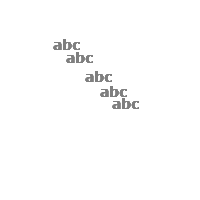
<style>
.page{position:relative;width:200px;height:200px;background:#ffffff}
.page>*{position:absolute;margin:0}
.t1{font:14px "Verdana-Bold";color:#7f7f7f}
</style>
<div class="page">
<p class="t1" style="left:53px;top:39px;width:27px;height:11px">abc</p>
<p class="t1" style="left:53px;top:39px;width:27px;height:11px">abc</p>
<p class="t1" style="left:53px;top:39px;width:27px;height:11px">abc</p>
<p class="t1" style="left:53px;top:39px;width:27px;height:11px">abc</p>
<p class="t1" style="left:53px;top:39px;width:27px;height:11px">abc</p>
<p class="t1" style="left:53px;top:39px;width:27px;height:11px">abc</p>
<p class="t1" style="left:66px;top:52px;width:27px;height:11px">abc</p>
<p class="t1" style="left:66px;top:52px;width:27px;height:11px">abc</p>
<p class="t1" style="left:66px;top:52px;width:27px;height:11px">abc</p>
<p class="t1" style="left:66px;top:52px;width:27px;height:11px">abc</p>
<p class="t1" style="left:66px;top:52px;width:27px;height:11px">abc</p>
<p class="t1" style="left:66px;top:52px;width:27px;height:11px">abc</p>
<p class="t1" style="left:85px;top:71px;width:27px;height:11px">abc</p>
<p class="t1" style="left:85px;top:71px;width:27px;height:11px">abc</p>
<p class="t1" style="left:85px;top:71px;width:27px;height:11px">abc</p>
<p class="t1" style="left:85px;top:71px;width:27px;height:11px">abc</p>
<p class="t1" style="left:85px;top:71px;width:27px;height:11px">abc</p>
<p class="t1" style="left:85px;top:71px;width:27px;height:11px">abc</p>
<p class="t1" style="left:100px;top:86px;width:27px;height:11px">abc</p>
<p class="t1" style="left:100px;top:86px;width:27px;height:11px">abc</p>
<p class="t1" style="left:100px;top:86px;width:27px;height:11px">abc</p>
<p class="t1" style="left:100px;top:86px;width:27px;height:11px">abc</p>
<p class="t1" style="left:100px;top:86px;width:27px;height:11px">abc</p>
<p class="t1" style="left:100px;top:86px;width:27px;height:11px">abc</p>
<p class="t1" style="left:112px;top:98px;width:27px;height:11px">abc</p>
<p class="t1" style="left:112px;top:98px;width:27px;height:11px">abc</p>
<p class="t1" style="left:112px;top:98px;width:27px;height:11px">abc</p>
<p class="t1" style="left:112px;top:98px;width:27px;height:11px">abc</p>
<p class="t1" style="left:112px;top:98px;width:27px;height:11px">abc</p>
<p class="t1" style="left:112px;top:98px;width:27px;height:11px">abc</p>
</div>
